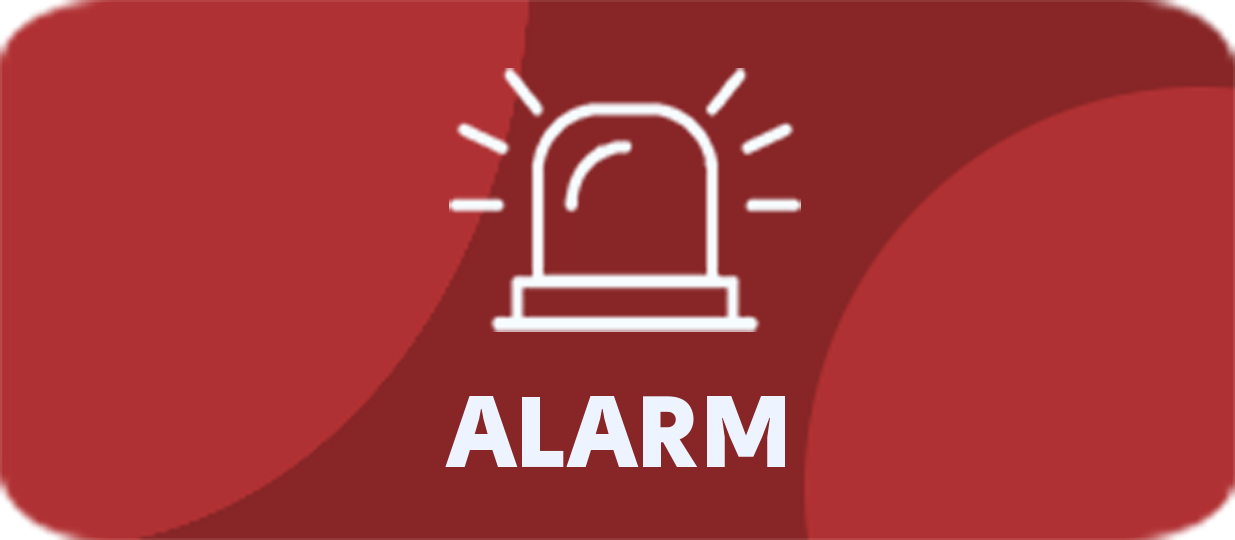
<style>
.page{position:relative;width:1235px;height:540px;background:#b03133}
.page>*{position:absolute;margin:0}
.t1{font:100.7px "Solomon-Sans-Black";color:#eef4ff}
</style>
<div class="page">
<p class="t1" style="left:445px;top:396px;width:340px;height:71px">ALARM</p>
</div>
